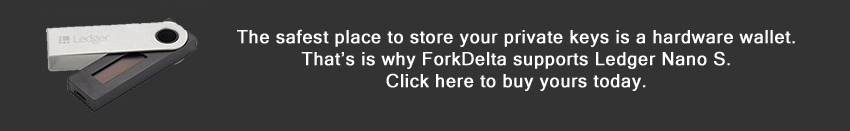
<style>
.page{position:relative;width:850px;height:131px;background:#333333}
.page>*{position:absolute;margin:0}
.t1{font:18px "MicrosoftSansSerif";letter-spacing:0.02em;color:#ffffff;font-weight:bold}
</style>
<div class="page">
<p class="t1" style="left:237px;top:29px;width:558px;height:62px;text-align:center">The safest place to store your private keys is a hardware wallet.<br>That’s is why ForkDelta supports Ledger Nano S.<br>Click here to buy yours today.</p>
</div>
